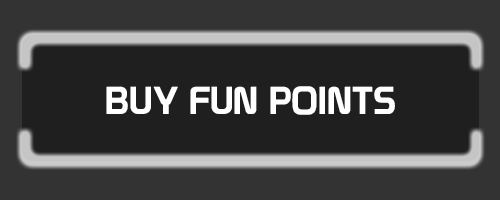
<style>
.page{position:relative;width:500px;height:200px;background:#1f1f1f}
.page>*{position:absolute;margin:0}
.t1{font:38px "Prototype";color:#ffffff}
</style>
<div class="page">
<p class="t1" style="left:106px;top:86px;width:289px;height:29px">BUY FUN POINTS</p>
</div>
